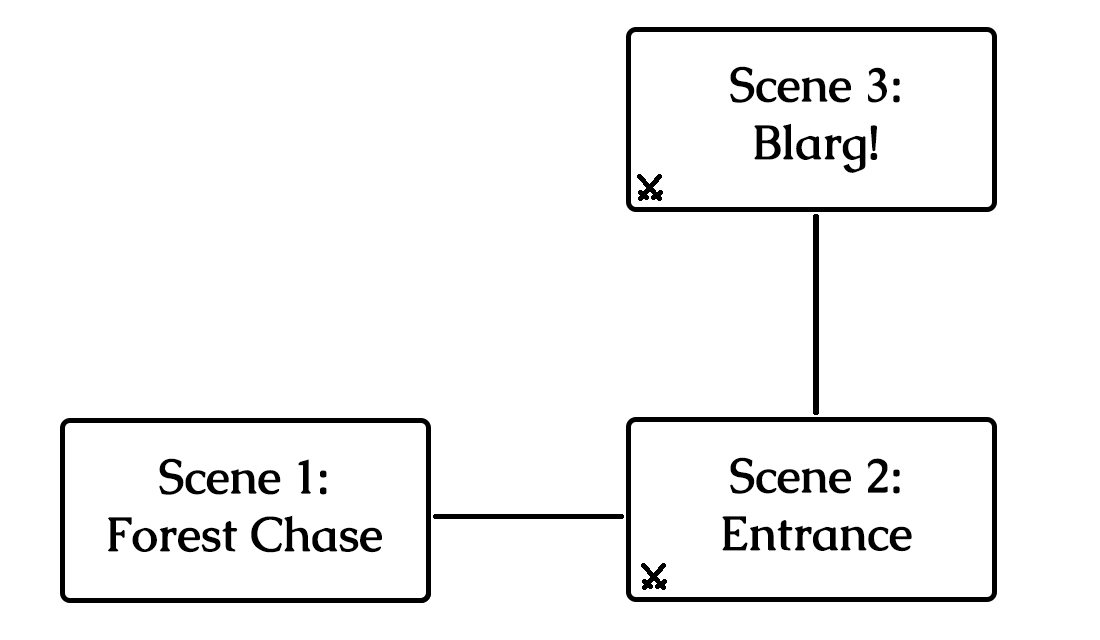
<style>
.page{position:relative;width:1100px;height:640px;background:#ffffff}
.page>*{position:absolute;margin:0}
.t1{font:48px "Caudex-Bold";color:#000000}
</style>
<div class="page">
<p class="t1" style="left:730px;top:66px;width:170px;height:107px;text-align:center">Scene 3:<br>Blarg!</p>
<p class="t1" style="left:108px;top:458px;width:274px;height:95px;text-align:center">Scene 1:<br>Forest Chase</p>
<p class="t1" style="left:722px;top:457px;width:190px;height:95px;text-align:center">Scene 2:<br>Entrance</p>
</div>
